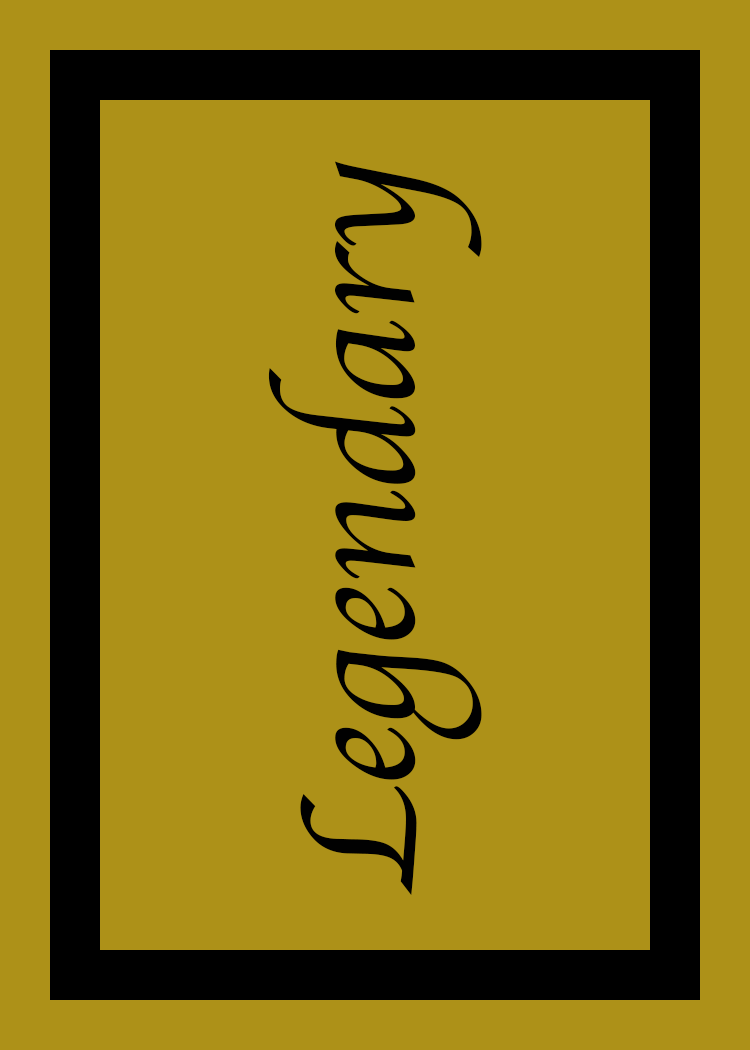
<style>
.page{position:relative;width:750px;height:1050px;background:#ad9118}
.page>*{position:absolute;margin:0}
.t1{font:166.7px "Apple-Chancery";color:#010101}
</style>
<div class="page">
<p class="t1" style="left:268px;top:161px;width:214px;height:734px;rotate:-90deg">Legendary</p>
</div>
